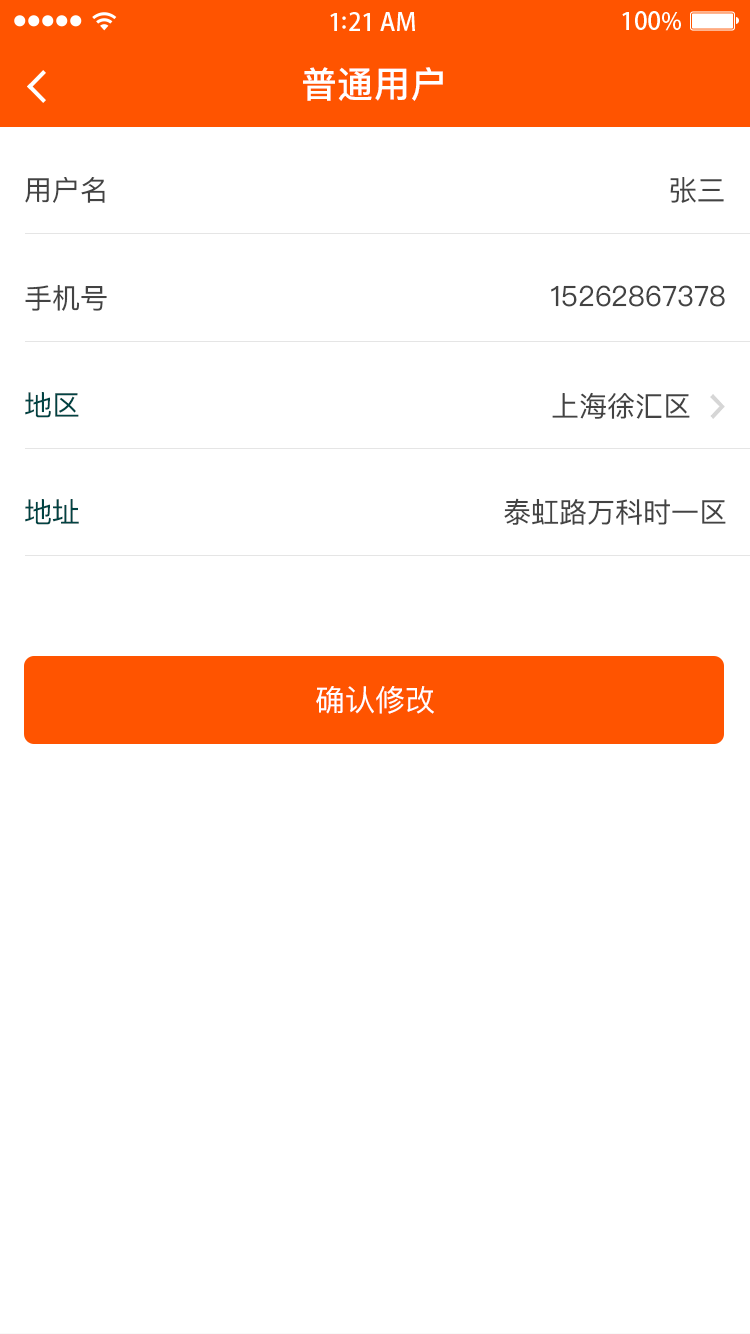
<style>
.page{position:relative;width:750px;height:1334px;background:#ffffff}
.page>*{position:absolute;margin:0}
.t1{font:36px "PingFangSC-Medium";letter-spacing:0.02em;color:#ffffff}
.t2{font:28px "PingFangSC-Regular";color:#434343}
.t3{font:28px "PingFangSC-Regular";color:#004343}
.t4{font:30px "PingFangSC-Regular";color:#ffffff;text-transform:uppercase}
</style>
<div class="page">
<p class="t1" style="left:303px;top:67px;width:140px;height:34px">普通用户</p>
<p class="t2" style="left:25px;top:177px;width:80px;height:26px">用户名</p>
<p class="t2" style="left:670px;top:177px;width:54px;height:26px">张三</p>
<p class="t2" style="left:25px;top:285px;width:82px;height:26px">手机号</p>
<p class="t2" style="left:551px;top:285px;width:174px;height:22px">15262867378</p>
<p class="t3" style="left:25px;top:392px;width:54px;height:26px">地区</p>
<p class="t2" style="left:552px;top:392px;width:138px;height:27px">上海徐汇区</p>
<p class="t3" style="left:25px;top:499px;width:54px;height:26px">地址</p>
<p class="t2" style="left:504px;top:498px;width:222px;height:27px">泰虹路万科时一区</p>
<p class="t4" style="left:316px;top:686px;width:118px;height:28px">确认修改</p>
</div>
